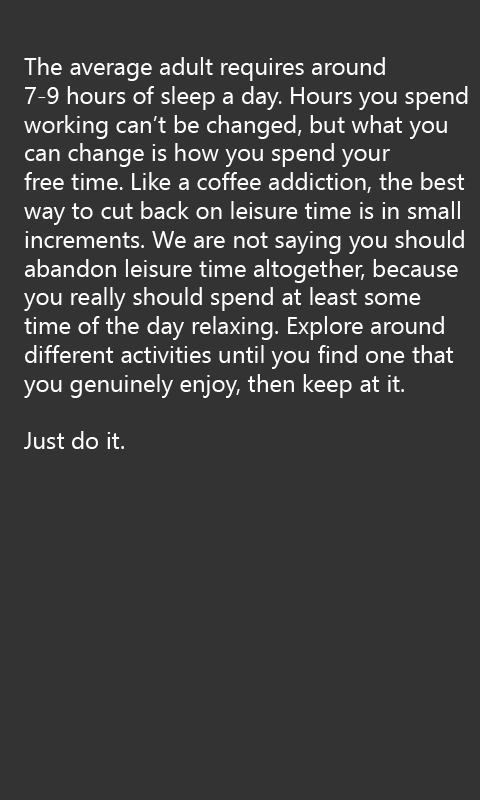
<style>
.page{position:relative;width:480px;height:800px;background:#333333}
.page>*{position:absolute;margin:0}
.t1{font:24px "SegoeUIHistoric";color:#ffffff}
</style>
<div class="page">
<p class="t1" style="left:24px;top:57px;width:444px;height:392px">The average adult requires around <br>7-9 hours of sleep a day. Hours you spend<br>working can’t be changed, but what you <br>can change is how you spend your<br>free time. Like a coffee addiction, the best<br>way to cut back on leisure time is in small<br>increments. We are not saying you should<br>abandon leisure time altogether, because<br>you really should spend at least some<br>time of the day relaxing. Explore around<br>different activities until you find one that<br>you genuinely enjoy, then keep at it.<br><br>Just do it.</p>
</div>
